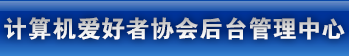
<style>
.page{position:relative;width:349px;height:56px}
.page>*{position:absolute;margin:0}
.t1{font:24px "FZDHTJW--GB1-0";letter-spacing:0.02em}
</style>
<div class="page">
<p class="t1" style="left:4px;top:17px;width:341px;height:23px">计算机爱好者协会后台管理中心</p>
</div>
